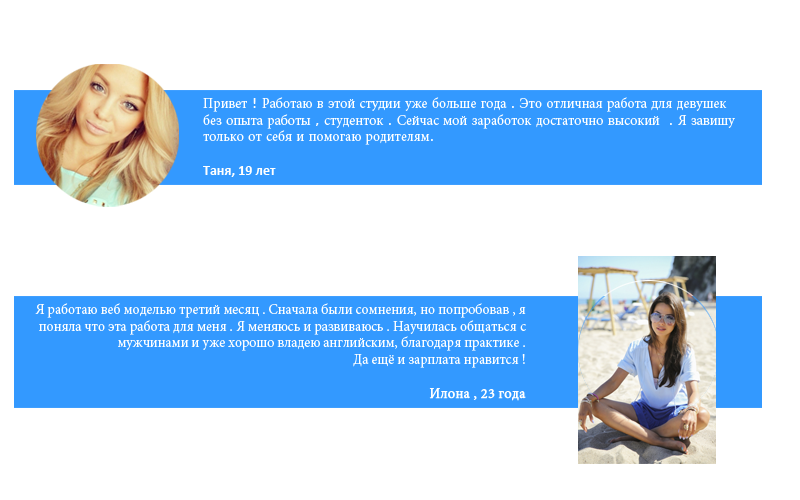
<style>
.page{position:relative;width:800px;height:500px;background:#ffffff}
.page>*{position:absolute;margin:0}
.t1{font:14px "MinionPro-Regular";color:#ffffff}
.t2{font:14px "SneakerheadBTN";color:#ffffff}
.t3{font:14px "PrimaSansBT-Roman";color:#ffffff}
.t4{font:14px "Calibri-Bold";color:#ffffff}
.t5{font:14px "MinionPro-Regular";color:#ffffff;font-weight:bold}
</style>
<div class="page">
<p class="t1" style="left:203px;top:97px;width:532px;height:80px"><span class="t2"><br></span>Привет<span class="t3"> ! </span>Работаю в этой студии уже больше года<span class="t3"> . </span>Это отличная работа для девушек <br>без опыта работы<span class="t3"> , </span>студенток<span class="t3"> . </span>Сейчас мой заработок достаточно высокий<span class="t3">  . </span>Я завишу <br>только от себя и помогаю родителям<span class="t3">.<br><br></span><span class="t4">Таня, 19 лет</span></p>
<p class="t1" style="left:35px;top:303px;width:491px;height:98px"><span class="t2"><br></span>Я работаю веб моделью третий месяц . Сначала были сомнения, но попробовав , я <br>поняла что эта работа для меня . Я меняюсь и развиваюсь . Научилась общаться с <br>мужчинами и уже хорошо владею английским, благодаря практике . <br>Да ещё и зарплата нравится ! <br><br><span class="t5">Илона , 23 года</span></p>
</div>
